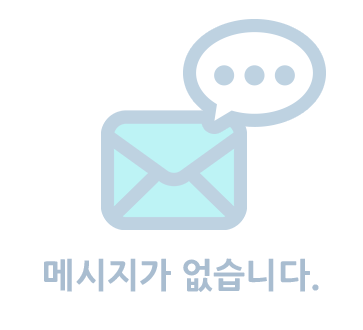
<style>
.page{position:relative;width:363px;height:330px;background:#ffffff}
.page>*{position:absolute;margin:0}
.t1{font:34.3px "NanumGothicExtraBold";color:#a9bdd0}
</style>
<div class="page">
<p class="t1" style="left:44px;top:258px;width:275px;height:34px">메시지가 없습니다.</p>
</div>
